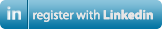
<style>
.page{position:relative;width:162px;height:29px}
.page>*{position:absolute;margin:0}
.t1{font:13px "MyriadPro-Regular";color:#e6e6e6}
.t2{font:13px "MyriadPro-Bold";color:#e6e6e6}
</style>
<div class="page">
<p class="t1" style="left:33px;top:9px;width:120px;height:13px">register with <span class="t2">Linkedin</span></p>
</div>
